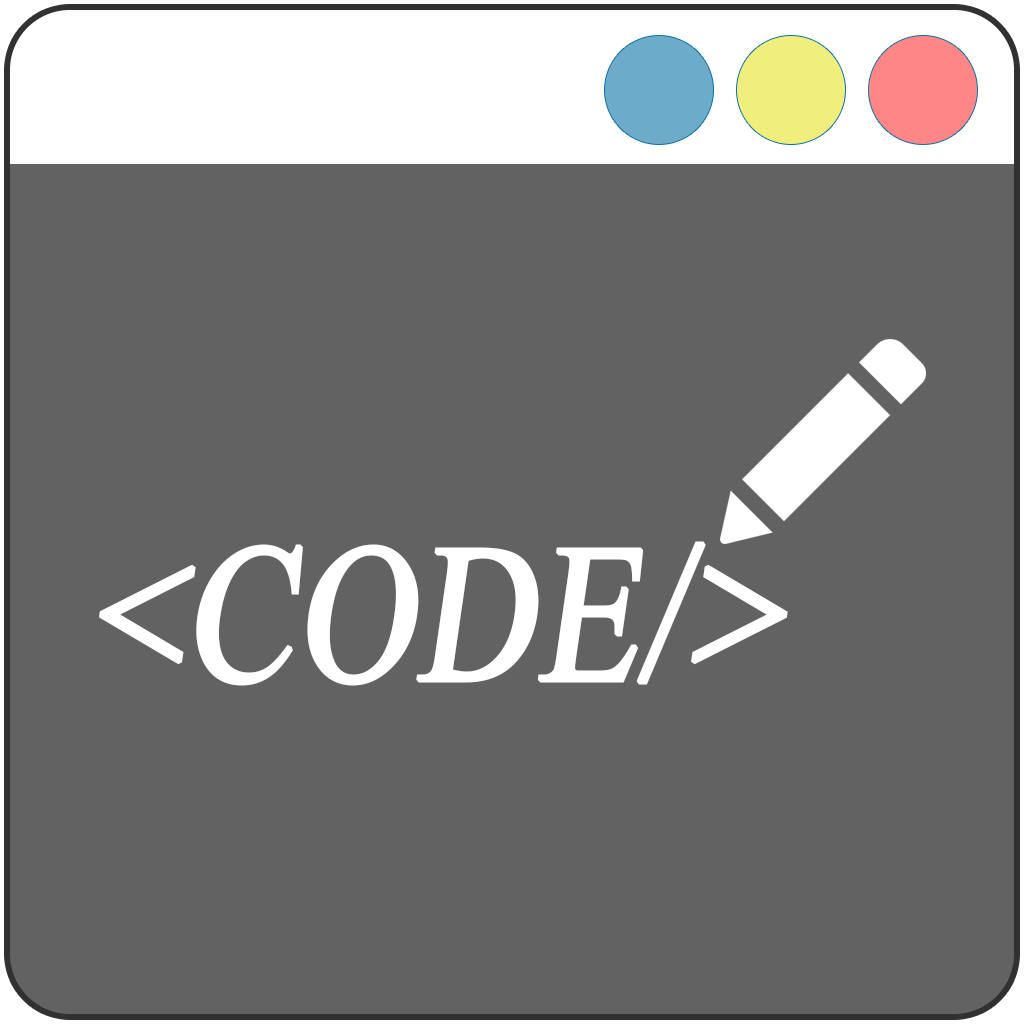
<style>
.page{position:relative;width:1024px;height:1024px;background:#626262}
.page>*{position:absolute;margin:0}
.t1{font:196px "TimesNewRomanPSMT";color:#ffffff;font-weight:bold;font-style:italic;scale:0.82 1}
</style>
<div class="page">
<p class="t1" style="left:99px;top:541px;width:689px;height:145px">&lt;CODE/&gt;</p>
</div>
